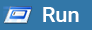
<style>
.page{position:relative;width:92px;height:30px;background:#3277a8}
.page>*{position:absolute;margin:0}
.t1{font:21.3px "Roboto-Medium";color:#ffffff}
</style>
<div class="page">
<p class="t1" style="left:43px;top:7px;width:36px;height:15px">Run</p>
</div>
